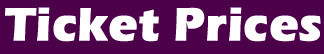
<style>
.page{position:relative;width:324px;height:54px;background:#4b0049}
.page>*{position:absolute;margin:0}
.t1{font:48px "ErasITC-Bold";color:#ffffff;font-weight:bold}
</style>
<div class="page">
<p class="t1" style="left:5px;top:7px;width:316px;height:35px">Ticket Prices</p>
</div>
